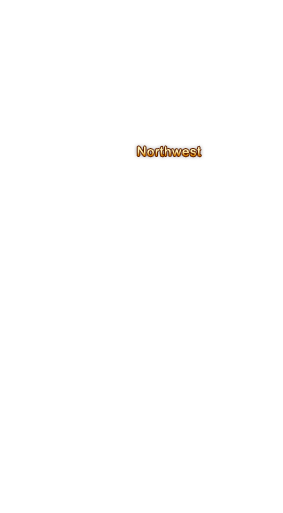
<style>
.page{position:relative;width:283px;height:513px;background:#ffffff}
.page>*{position:absolute;margin:0}
.t1{font:13px "ArialMT";letter-spacing:0.05em}
</style>
<div class="page">
<p class="t1" style="left:137px;top:146px;width:64px;height:11px">Northwest</p>
</div>
